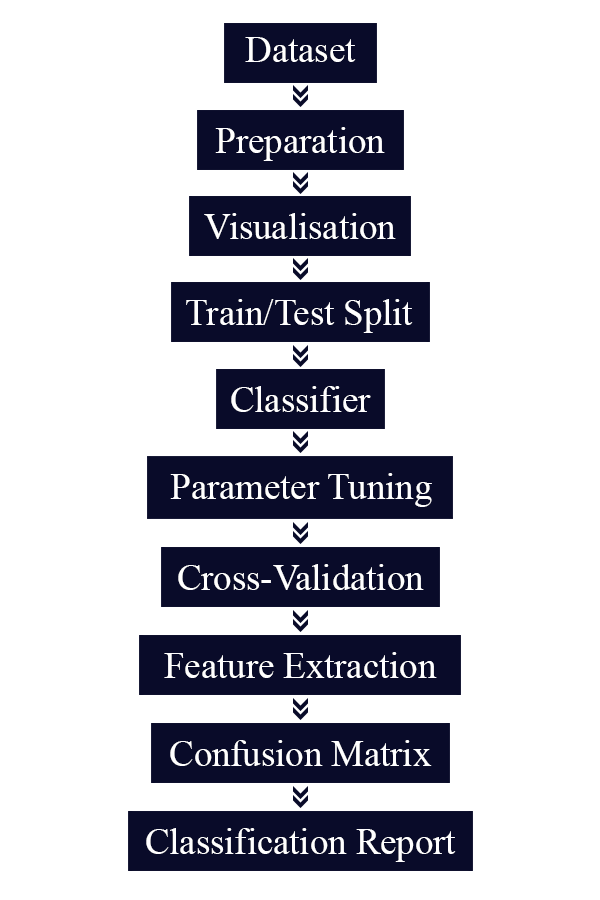
<style>
.page{position:relative;width:600px;height:900px;background:#ffffff}
.page>*{position:absolute;margin:0}
.t1{font:36.7px "TimesNewRomanPSMT";color:#ffffff}
</style>
<div class="page">
<p class="t1" style="left:245px;top:37px;width:111px;height:25px">Dataset</p>
<p class="t1" style="left:215px;top:127px;width:170px;height:34px">Preparation</p>
<p class="t1" style="left:204px;top:213px;width:192px;height:26px">Visualisation</p>
<p class="t1" style="left:186px;top:299px;width:227px;height:34px">Train/Test Split</p>
<p class="t1" style="left:231px;top:386px;width:140px;height:26px">Classifier</p>
<p class="t1" style="left:170px;top:473px;width:262px;height:34px">Parameter Tuning</p>
<p class="t1" style="left:178px;top:564px;width:246px;height:26px">Cross-Validation</p>
<p class="t1" style="left:164px;top:652px;width:273px;height:26px">Feature Extraction</p>
<p class="t1" style="left:170px;top:740px;width:262px;height:26px">Confusion Matrix</p>
<p class="t1" style="left:146px;top:828px;width:310px;height:34px">Classification Report</p>
</div>
